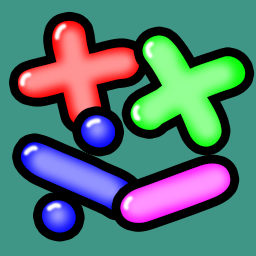
<style>
.page{position:relative;width:256px;height:256px;background:#3f9686}
.page>*{position:absolute;margin:0}
.t1{font:267.6px "ComicSansMS-Bold"}
.t2{font:250.5px "ComicSansMS-Bold"}
.t3{font:268.2px "ComicSansMS-Bold"}
.t4{font:290.1px "ComicSansMS-Bold"}
</style>
<div class="page">
<p class="t1" style="left:18px;top:20px;width:122px;height:106px;rotate:-13deg">+</p>
<p class="t2" style="left:130px;top:35px;width:116px;height:112px;rotate:20deg">×</p>
<p class="t3" style="left:21px;top:115px;width:116px;height:118px;rotate:25deg">÷</p>
<p class="t4" style="left:120px;top:163px;width:111px;height:60px;rotate:-19deg">-</p>
</div>
